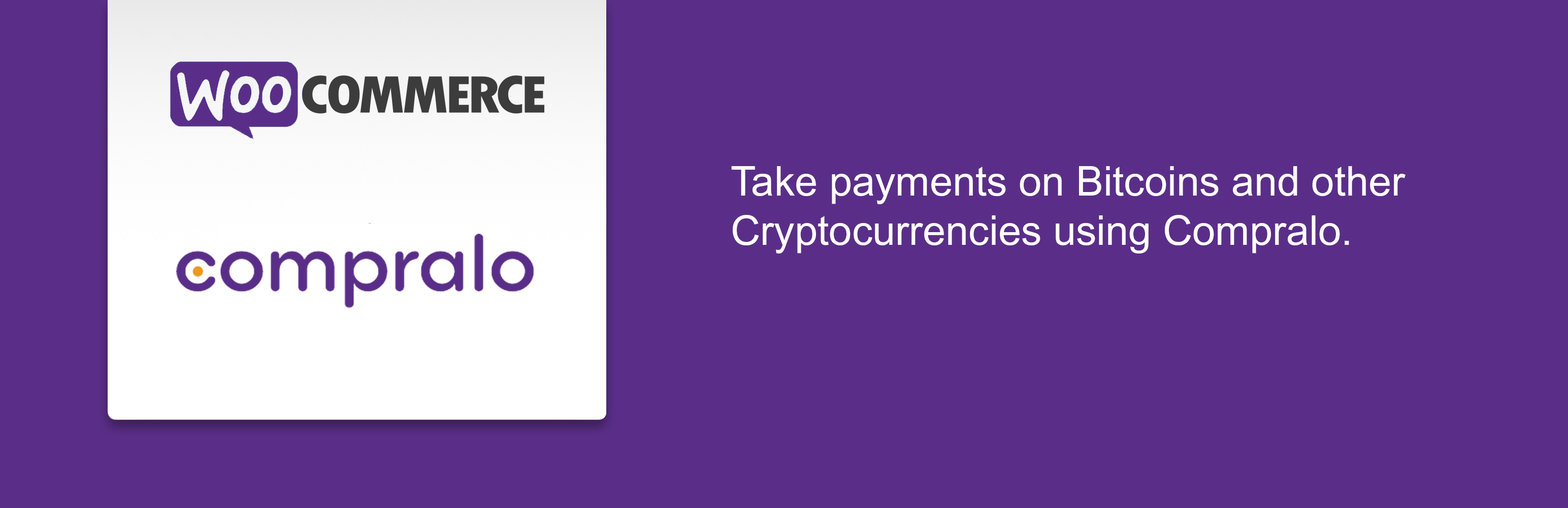
<style>
.page{position:relative;width:1568px;height:508px;background:#5a2e88}
.page>*{position:absolute;margin:0}
.t1{font:41.1px "DokChampa";color:#ffffff}
</style>
<div class="page">
<p class="t1" style="left:731px;top:166px;width:675px;height:87px">Take payments on Bitcoins and other Cryptocurrencies using Compralo.</p>
</div>
